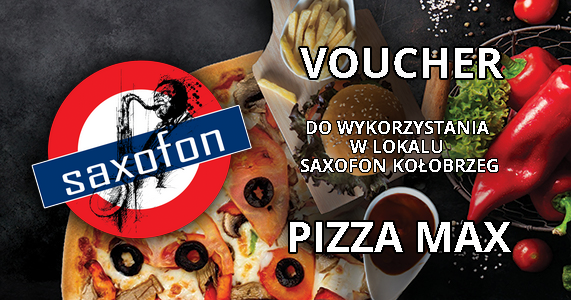
<style>
.page{position:relative;width:571px;height:300px}
.page>*{position:absolute;margin:0}
.t1{font:42px "OpenSans-Bold";color:#fefefe}
.t2{font:18px/19.2px "OpenSans-Bold";color:#fefefe}
</style>
<div class="page">
<p class="t1" style="left:300px;top:48px;width:203px;height:30px">VOUCHER</p>
<p class="t2" style="left:301px;top:121px;width:197px;height:51px;text-align:center">DO WYKORZYSTANIA <br>W LOKALU <br>SAXOFON KOŁOBRZEG</p>
<p class="t1" style="left:290px;top:222px;width:221px;height:30px">PIZZA MAX</p>
</div>
